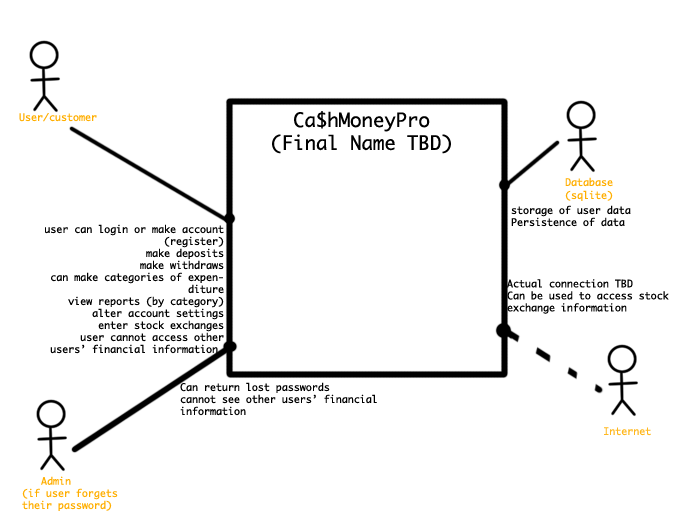
<style>
.page{position:relative;width:682px;height:520px;background:#ffffff}
.page>*{position:absolute;margin:0}
.t1{font:19px "Ayuthaya";color:#000000}
.t2{font:10px "Ayuthaya";color:#000000}
.t3{font:10px "Ayuthaya";color:#ffb81f}
</style>
<div class="page">
<p class="t1" style="left:272px;top:111px;width:179px;height:43px;text-align:center">Ca$hMoneyPro<br>(Final Name TBD)</p>
<p class="t2" style="left:511px;top:205px;width:120px;height:22px">storage of user data<br>Persistence of data</p>
<p class="t2" style="left:45px;top:224px;width:179px;height:130px;text-align:right">user can login or make account (register)<br>make deposits<br>make withdraws<br>can make categories of expenditure<br>view reports (by category)<br>alter account settings<br>enter stock exchanges<br>user cannot access other users’ financial information</p>
<p class="t2" style="left:507px;top:279px;width:162px;height:35px">Actual connection TBD<br>Can be used to access stock exchange information</p>
<p class="t2" style="left:180px;top:382px;width:197px;height:34px">Can return lost passwords<br>cannot see other users’ financial information</p>
<p class="t3" style="left:604px;top:427px;width:47px;height:9px">Internet</p>
</div>
